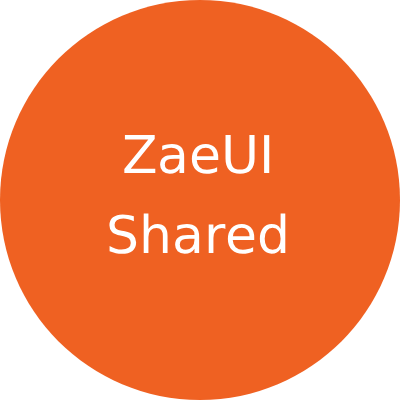
<style>
.page{position:relative;width:400px;height:400px;background:#ef6122}
.page>*{position:absolute;margin:0}
.t1{font:52px "DejaVuSans";color:#ffffff}
</style>
<div class="page">
<p class="t1" style="left:109px;top:135px;width:177px;height:119px;text-align:center">ZaeUI<br><br>Shared</p>
</div>
